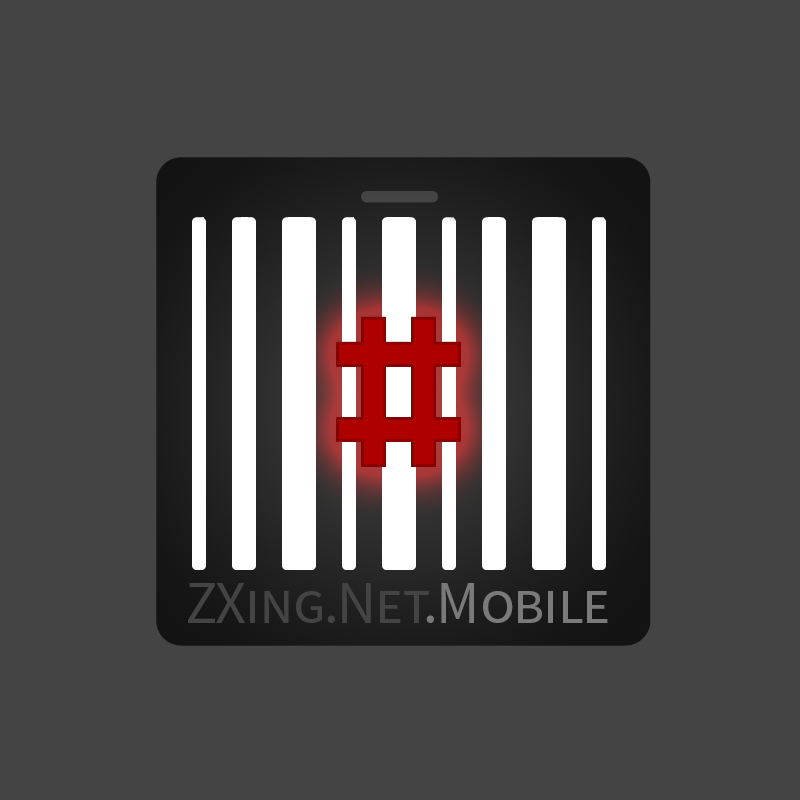
<style>
.page{position:relative;width:800px;height:800px;background:#444444}
.page>*{position:absolute;margin:0}
.t1{font:400px "BrightonTwo-Gothika-NBP";color:#af0000}
.t2{font:60px "SourceSansPro-Regular";letter-spacing:-0.025em;color:#444444;font-variant:small-caps}
.t3{font:60px "SourceSansPro-Regular";letter-spacing:-0.025em;color:#7a7a7a;font-variant:small-caps}
</style>
<div class="page">
<p class="t1" style="left:336px;top:316px;width:125px;height:151px">#</p>
<p class="t2" style="left:188px;top:583px;width:420px;height:40px">ZXing.Net<span class="t3">.Mobile</span></p>
</div>
